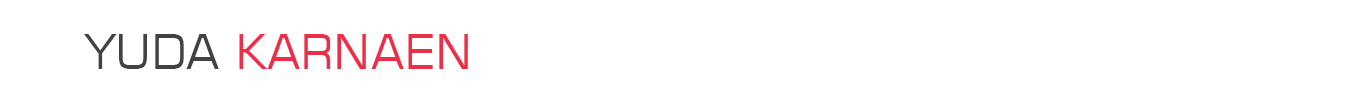
<style>
.page{position:relative;width:1366px;height:100px;background:#ffffff}
.page>*{position:absolute;margin:0}
.t1{font:48.3px "Square721BT-Roman";color:#ed2e49}
.t2{font:48.3px "Square721BT-Roman";color:#434141}
</style>
<div class="page">
<p class="t1" style="left:83px;top:34px;width:385px;height:35px"><span class="t2">YUDA </span>KARNAEN</p>
</div>
